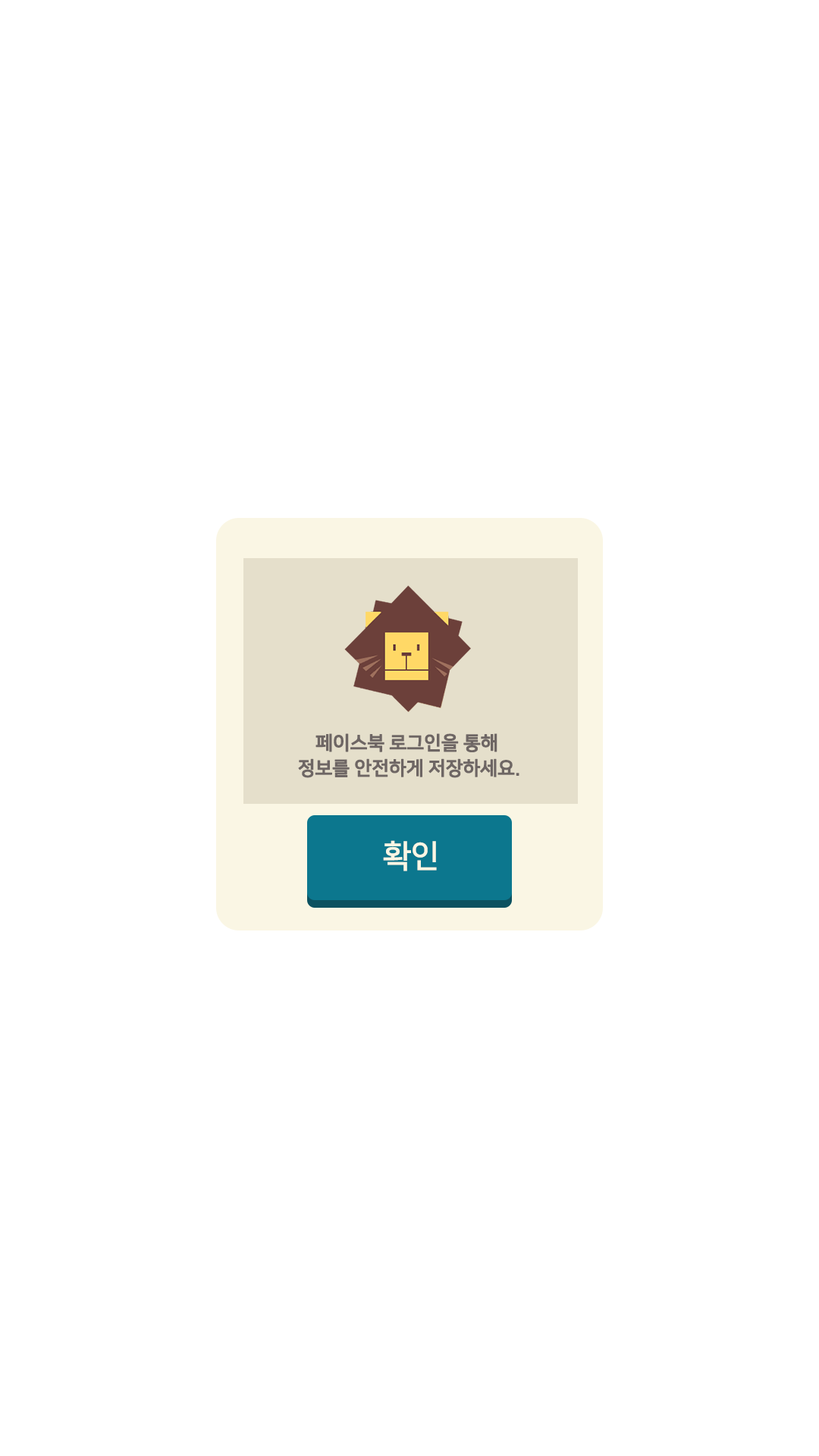
<style>
.page{position:relative;width:819px;height:1456px;background:#ffffff}
.page>*{position:absolute;margin:0}
.t1{font:19px/25.3px "NanumSquareOTFB";letter-spacing:-0.025em;color:#6e6664;font-weight:bold}
.t2{font:31.6px "NanumSquareOTFB";letter-spacing:-0.025em;color:#faf6e4}
</style>
<div class="page">
<p class="t1" style="left:298px;top:733px;width:221px;height:45px;text-align:center">페이스북 로그인을 통해 <br>정보를 안전하게 저장하세요.</p>
<p class="t2" style="left:383px;top:840px;width:54px;height:31px">확인</p>
</div>
